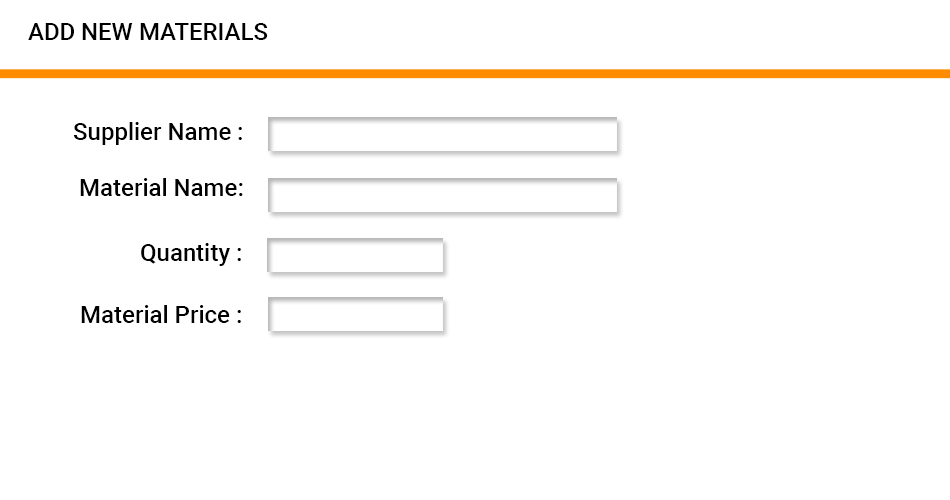
<style>
.page{position:relative;width:950px;height:500px;background:#ffffff}
.page>*{position:absolute;margin:0}
.t1{font:24px "Roboto-Medium";color:#000000}
</style>
<div class="page">
<p class="t1" style="left:28px;top:23px;width:240px;height:17px">ADD NEW MATERIALS</p>
<p class="t1" style="left:73px;top:122px;width:169px;height:23px">Supplier Name :</p>
<p class="t1" style="left:80px;top:178px;width:163px;height:18px">Material Name:</p>
<p class="t1" style="left:141px;top:243px;width:100px;height:23px">Quantity :</p>
<p class="t1" style="left:81px;top:305px;width:160px;height:18px">Material Price :</p>
</div>
